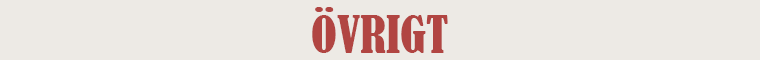
<style>
.page{position:relative;width:760px;height:60px;background:#edeae5}
.page>*{position:absolute;margin:0}
.t1{font:48px "BernardMT-Condensed";color:#b14542}
</style>
<div class="page">
<p class="t1" style="left:312px;top:7px;width:136px;height:46px">ÖVRIGT</p>
</div>
